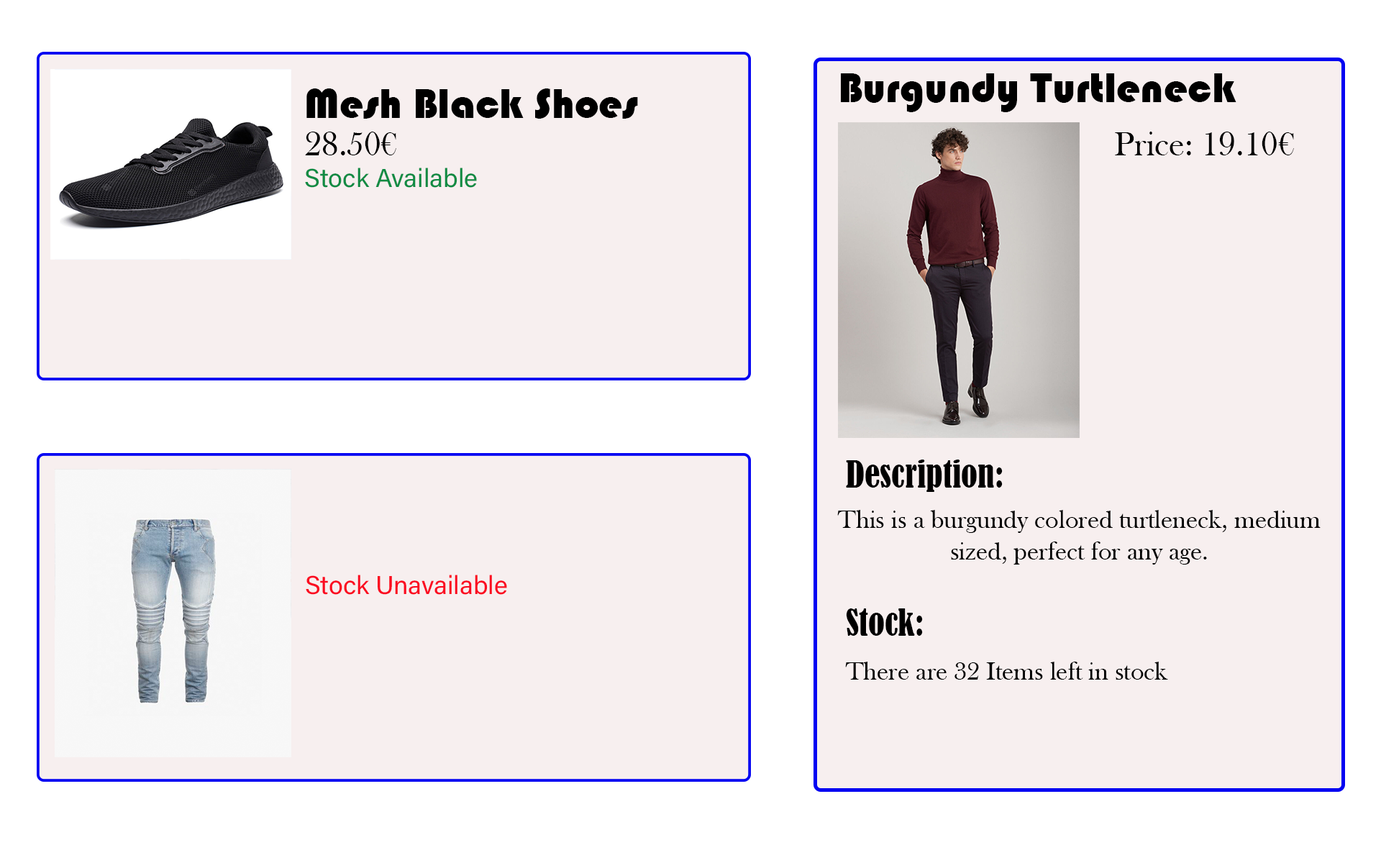
<style>
.page{position:relative;width:1381px;height:863px;background:#f7efef}
.page>*{position:absolute;margin:0}
.t1{font:43.2px "Bauhaus93";color:#000000}
.t2{font:34.5px "BaskOldFace";color:#000000}
.t3{font:25.9px "AcuminConcept-Regular";color:#0e8b43}
.t4{font:34.5px "BernardMT-Condensed";color:#000000}
.t5{font:25.9px "BaskOldFace";color:#000000}
.t6{font:25.9px "AcuminConcept-Regular";color:#fb0920}
</style>
<div class="page">
<p class="t1" style="left:841px;top:73px;width:396px;height:39px">Burgundy Turtleneck</p>
<p class="t1" style="left:306px;top:88px;width:332px;height:31px">Mesh Black Shoes</p>
<p class="t2" style="left:305px;top:132px;width:91px;height:23px">28.50€</p>
<p class="t2" style="left:1115px;top:132px;width:179px;height:23px">Price: 19.10€</p>
<p class="t3" style="left:305px;top:168px;width:172px;height:20px">Stock Available</p>
<p class="t4" style="left:846px;top:460px;width:157px;height:32px">Description:</p>
<p class="t5" style="left:837px;top:510px;width:484px;height:55px;text-align:center">This is a burgundy colored turtleneck, medium sized, perfect for any age.</p>
<p class="t6" style="left:306px;top:575px;width:201px;height:20px">Stock Unavailable</p>
<p class="t4" style="left:846px;top:609px;width:77px;height:27px">Stock:</p>
<p class="t5" style="left:845px;top:662px;width:323px;height:18px">There are 32 Items left in stock</p>
</div>
